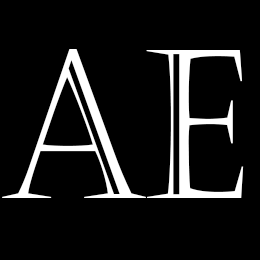
<style>
.page{position:relative;width:260px;height:260px;background:#000000}
.page>*{position:absolute;margin:0}
.t1{font:206.8px "Castellar";color:#ffffff;text-transform:uppercase;scale:0.87 1}
</style>
<div class="page">
<p class="t1" style="left:2px;top:49px;width:242px;height:149px">AE</p>
</div>
